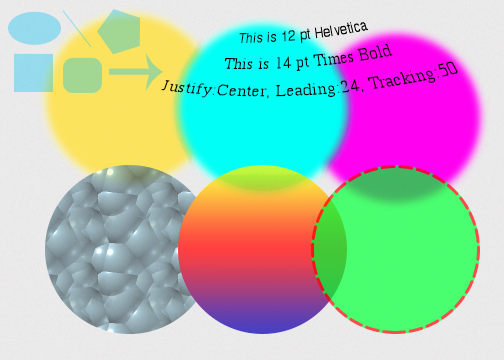
<style>
.page{position:relative;width:504px;height:360px}
.page>*{position:absolute;margin:0}
.t1{font:15.7px/26.9px "Times-Roman";letter-spacing:0.05em;color:#000000;scale:0.95 1}
.t2{font:13.4px/26.9px "Helvetica";letter-spacing:0.05em;color:#000000;scale:0.95 1}
</style>
<div class="page">
<p class="t1" style="left:161px;top:22px;width:297px;height:77px;text-align:center;rotate:-4deg"><span class="t2">This is 12 pt Helvetica <br></span>This is 14 pt Times Bold<br>Justify:Center, Leading:24, Tracking:50</p>
</div>
